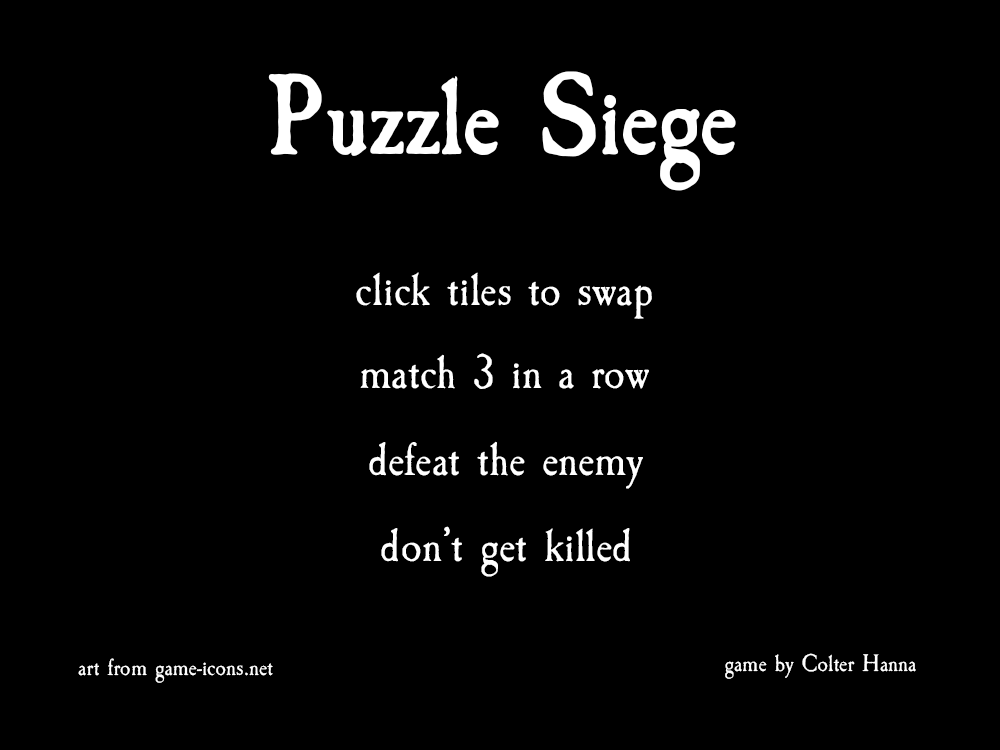
<style>
.page{position:relative;width:1000px;height:750px;background:#000000}
.page>*{position:absolute;margin:0}
.t1{font:120px "CaslonAntique-Bold";color:#ffffff}
.t2{font:50px "CaslonAntique";color:#ffffff}
.t3{font:25px "CaslonAntique";color:#ffffff}
</style>
<div class="page">
<p class="t1" style="left:268px;top:71px;width:468px;height:120px">Puzzle Siege</p>
<p class="t2" style="left:356px;top:272px;width:296px;height:47px">click tiles to swap</p>
<p class="t2" style="left:360px;top:353px;width:289px;height:36px">match 3 in a row</p>
<p class="t2" style="left:369px;top:441px;width:274px;height:48px">defeat the enemy</p>
<p class="t2" style="left:381px;top:526px;width:249px;height:51px">don’t get killed</p>
<p class="t3" style="left:725px;top:653px;width:191px;height:26px">game by Colter Hanna</p>
<p class="t3" style="left:78px;top:658px;width:195px;height:25px">art from game-icons.net</p>
</div>
